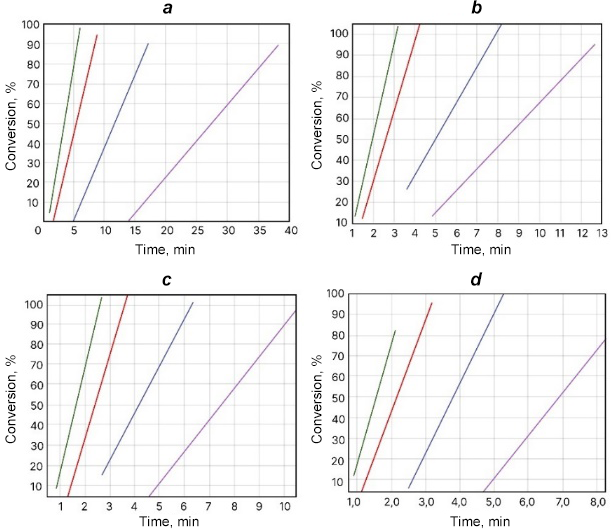
<style>
.page{position:relative;width:611px;height:529px;background:#ffffff}
.page>*{position:absolute;margin:0}
.t1{font:18.3px "Arial-BoldItalicMT";color:#000000}
.t2{font:13.8px "ArialMT";color:#000000}
</style>
<div class="page">
<p class="t1" style="left:163px;top:3px;width:10px;height:11px">a</p>
<p class="t1" style="left:471px;top:0px;width:11px;height:14px">b</p>
<p class="t2" style="left:5px;top:82px;width:13px;height:89px;rotate:-90deg">Conversion, %</p>
<p class="t2" style="left:311px;top:81px;width:13px;height:89px;rotate:-90deg">Conversion, %</p>
<p class="t2" style="left:135px;top:244px;width:60px;height:13px">Time, min</p>
<p class="t2" style="left:451px;top:244px;width:60px;height:13px">Time, min</p>
<p class="t1" style="left:162px;top:275px;width:10px;height:11px">c</p>
<p class="t1" style="left:471px;top:272px;width:12px;height:14px">d</p>
<p class="t2" style="left:5px;top:355px;width:13px;height:89px;rotate:-90deg">Conversion, %</p>
<p class="t2" style="left:311px;top:355px;width:13px;height:89px;rotate:-90deg">Conversion, %</p>
<p class="t2" style="left:139px;top:516px;width:60px;height:13px">Time, min</p>
<p class="t2" style="left:450px;top:516px;width:60px;height:13px">Time, min</p>
</div>
